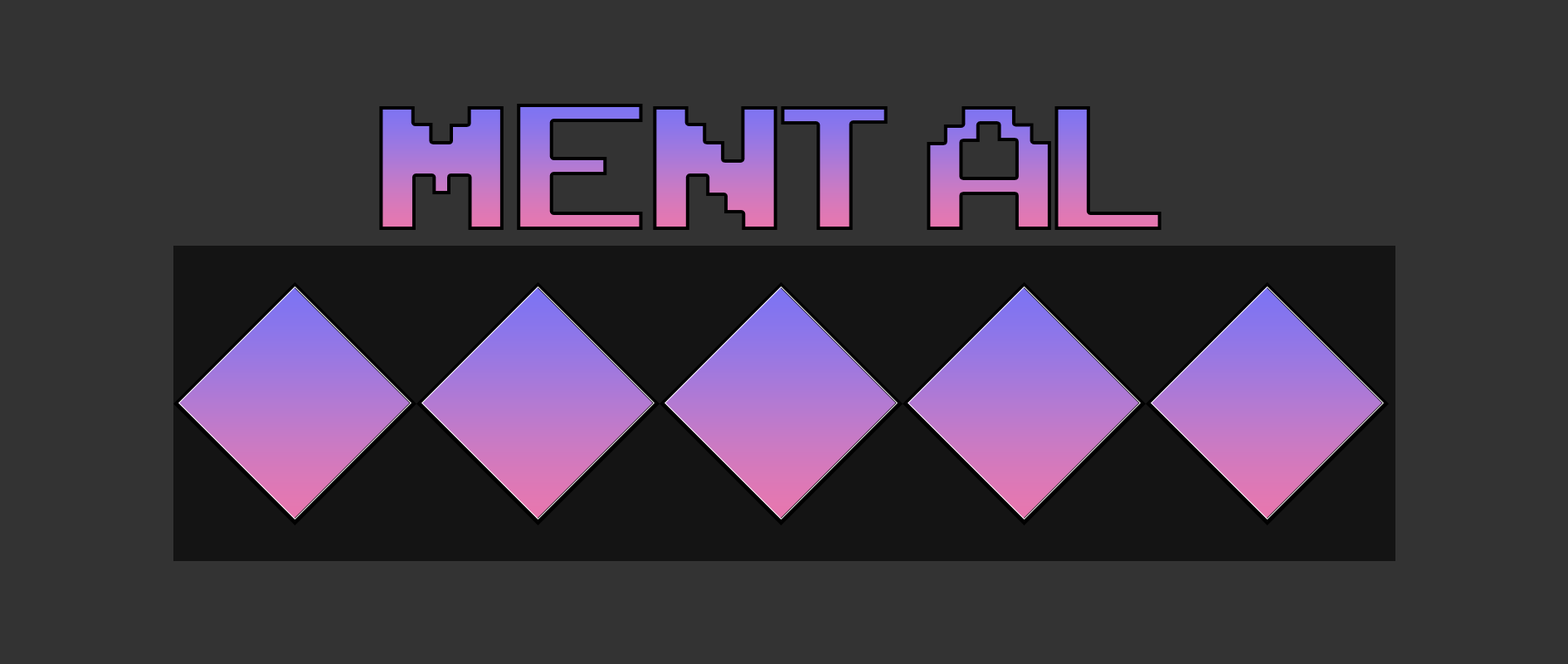
<style>
.page{position:relative;width:1568px;height:664px;background:#333333}
.page>*{position:absolute;margin:0}
.t1{font:248.9px "ArcadeClassic"}
</style>
<div class="page">
<p class="t1" style="left:379px;top:104px;width:782px;height:126px">MENTAL</p>
</div>
